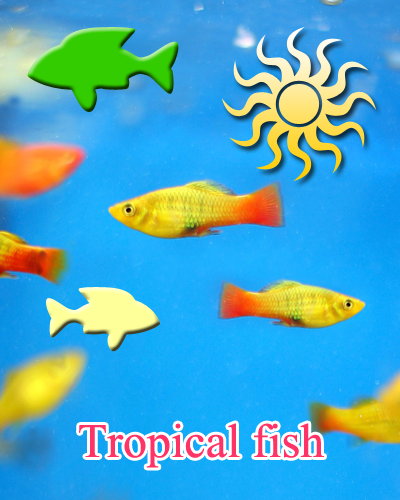
<style>
.page{position:relative;width:400px;height:500px}
.page>*{position:absolute;margin:0}
.t1{font:48px "TimesNewRomanPSMT";color:#ff3366}
</style>
<div class="page">
<p class="t1" style="left:79px;top:423px;width:245px;height:45px">Tropical fish</p>
</div>
